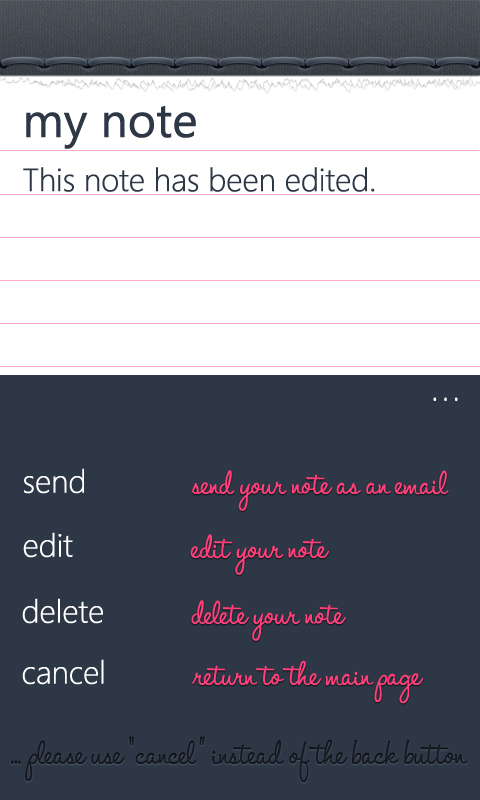
<style>
.page{position:relative;width:480px;height:800px;background:#2e3746}
.page>*{position:absolute;margin:0}
.t1{font:48px "SegoeUI";letter-spacing:-0.025em;color:#2e3746;font-weight:bold}
.t2{font:32px "SegoeUI-Light";letter-spacing:-0.025em;color:#2e3746;font-weight:bold}
.t3{font:48px "RefreshmentStand";letter-spacing:-0.025em;color:#ffffff;font-weight:bold}
.t4{font:32px "SegoeUI-Light";letter-spacing:-0.025em;color:#ffffff;font-weight:bold}
.t5{font:48px "RefreshmentStand";letter-spacing:-0.025em;color:#ff407a;font-weight:bold}
.t6{font:48px/108.3px "RefreshmentStand";letter-spacing:-0.025em;color:#141921;font-weight:bold}
</style>
<div class="page">
<p class="t1" style="left:26px;top:105px;width:170px;height:44px">my note</p>
<p class="t2" style="left:23px;top:167px;width:352px;height:25px">This note has been edited.</p>
<p class="t3" style="left:433px;top:397px;width:25px;height:4px">. . .</p>
<p class="t4" style="left:24px;top:468px;width:60px;height:26px">send</p>
<p class="t5" style="left:191px;top:470px;width:258px;height:41px">send your note as an email</p>
<p class="t4" style="left:23px;top:532px;width:50px;height:26px">edit</p>
<p class="t5" style="left:190px;top:534px;width:139px;height:41px">edit your note</p>
<p class="t4" style="left:22px;top:598px;width:81px;height:26px">delete</p>
<p class="t5" style="left:191px;top:600px;width:155px;height:41px">delete your note</p>
<p class="t4" style="left:22px;top:659px;width:82px;height:26px">cancel</p>
<p class="t5" style="left:192px;top:660px;width:232px;height:44px">return to the main page</p>
<p class="t6" style="left:11px;top:736px;width:457px;height:47px;text-align:center">... please use “cancel” instead of the back button <br>can</p>
</div>
